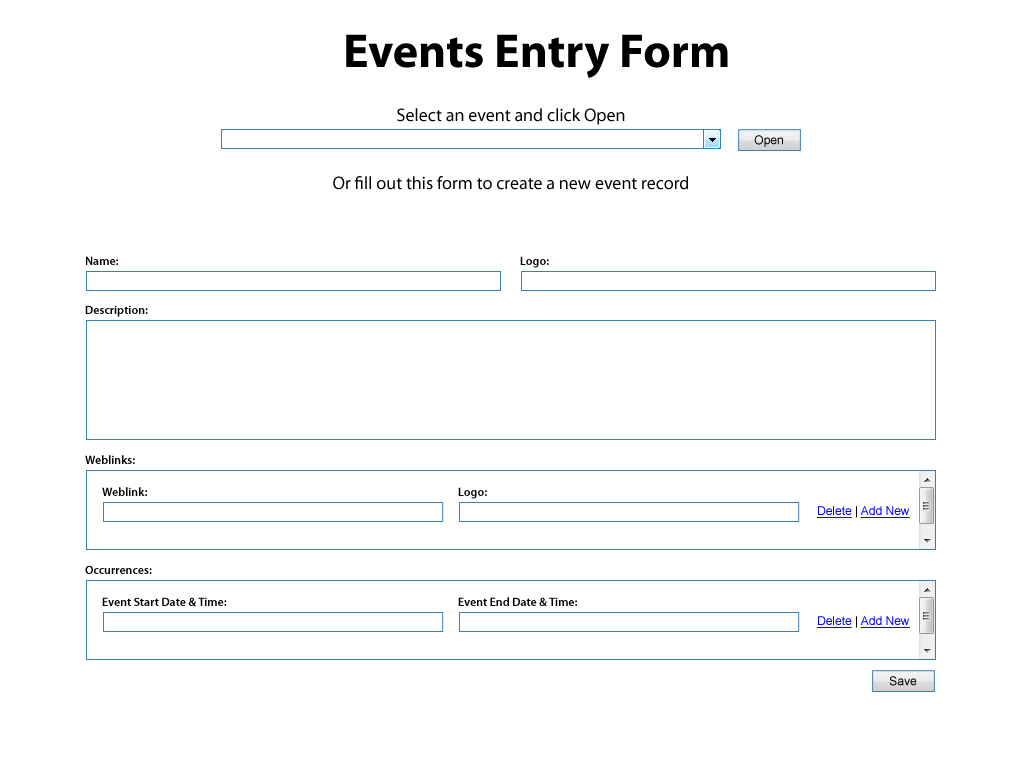
<style>
.page{position:relative;width:1024px;height:768px;background:#ffffff}
.page>*{position:absolute;margin:0}
.t1{font:48px "MyriadPro-Bold";color:#000000}
.t2{font:18px "MyriadPro-Regular";color:#000000}
.t3{font:12px "ArialMT";color:#000000}
.t4{font:12px "MyriadPro-Semibold";color:#000000}
.t5{font:12px "ArialMT";color:#0000ff;text-decoration:underline}
</style>
<div class="page">
<p class="t1" style="left:346px;top:34px;width:382px;height:44px">Events Entry Form</p>
<p class="t2" style="left:397px;top:108px;width:228px;height:17px">Select an event and click Open</p>
<p class="t3" style="left:754px;top:135px;width:29px;height:12px">Open</p>
<p class="t2" style="left:333px;top:176px;width:355px;height:14px">Or fill out this form to create a new event record</p>
<p class="t4" style="left:86px;top:256px;width:32px;height:9px">Name:</p>
<p class="t4" style="left:520px;top:256px;width:29px;height:12px">Logo:</p>
<p class="t4" style="left:85px;top:305px;width:63px;height:12px">Description:</p>
<p class="t4" style="left:85px;top:455px;width:50px;height:9px">Weblinks:</p>
<p class="t4" style="left:102px;top:487px;width:45px;height:9px">Weblink:</p>
<p class="t4" style="left:458px;top:487px;width:29px;height:12px">Logo:</p>
<p class="t5" style="left:817px;top:506px;width:93px;height:12px">Delete<span class="t3"> | </span>Add New</p>
<p class="t4" style="left:85px;top:565px;width:67px;height:9px">Occurrences:</p>
<p class="t4" style="left:102px;top:597px;width:125px;height:9px">Event Start Date &amp; Time:</p>
<p class="t4" style="left:458px;top:597px;width:119px;height:9px">Event End Date &amp; Time:</p>
<p class="t5" style="left:817px;top:616px;width:93px;height:12px">Delete<span class="t3"> | </span>Add New</p>
<p class="t3" style="left:889px;top:676px;width:28px;height:10px">Save</p>
</div>
